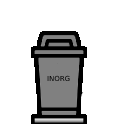
<style>
.page{position:relative;width:124px;height:124px;background:#ffffff}
.page>*{position:absolute;margin:0}
.t1{font:7px "DejaVuSans";color:#000000}
</style>
<div class="page">
<p class="t1" style="left:47px;top:75px;width:23px;height:7px">INORG</p>
</div>
